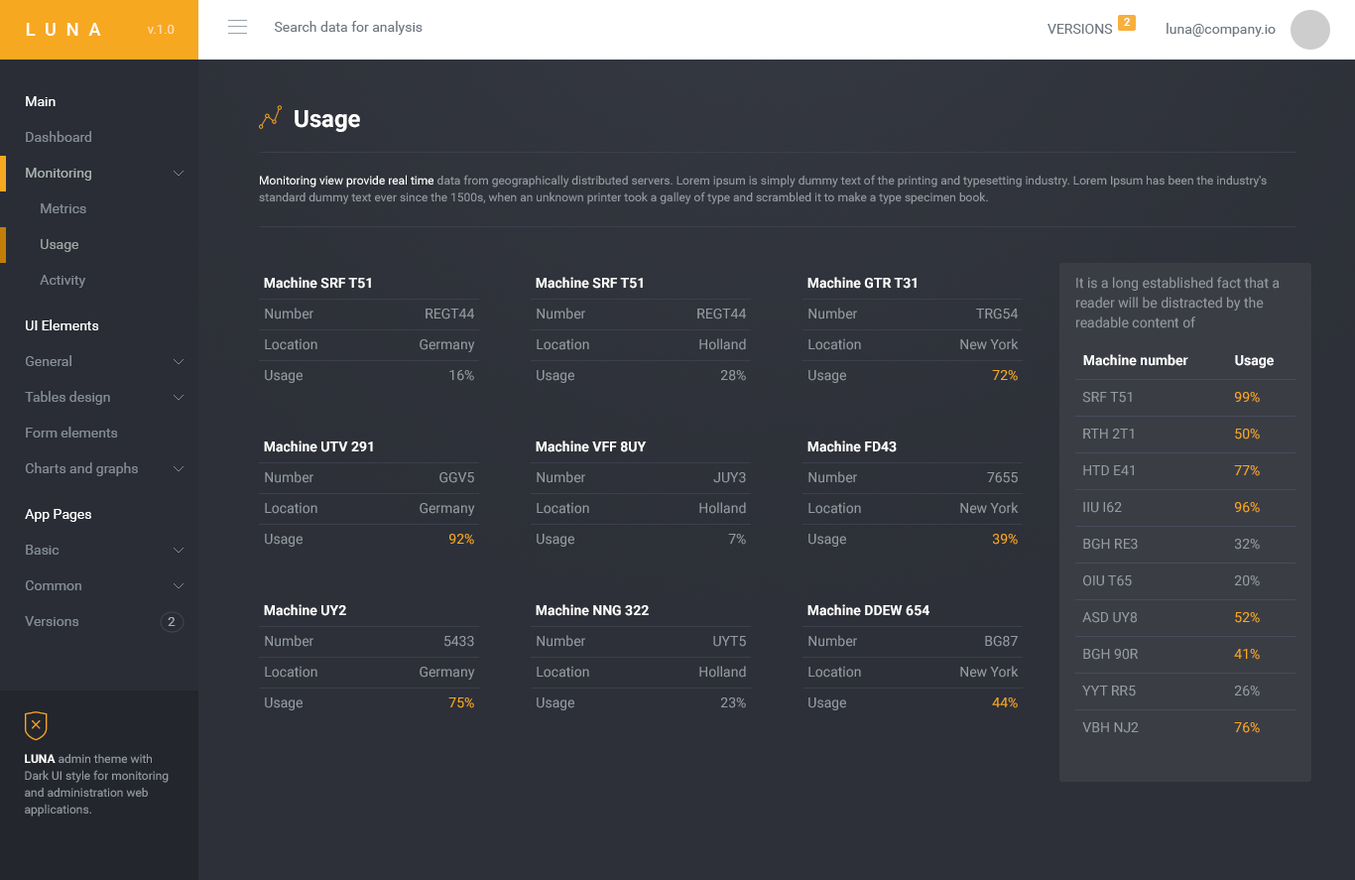
<style>
.page{position:relative;width:1355px;height:880px;background:#2d3038}
.page>*{position:absolute;margin:0}
.t1{font:10.9px "Roboto-Bold";color:#ffffff}
.t2{font:17.9px "Roboto-Medium";letter-spacing:0.55em;color:#ffffff}
.t3{font:12.9px "Roboto-Regular";color:#fbdfbc}
.t4{font:13.9px "Roboto-Regular";color:#6f7780}
.t5{font:13.9px "Roboto-Regular";color:#ffffff}
.t6{font:23.8px "Roboto-Bold";color:#ffffff}
.t7{font:13.9px "Roboto-Regular";color:#848c94}
.t8{font:13.9px "Roboto-Regular";color:#a9b2b0}
.t9{font:11.9px/16.9px "Roboto-Regular";color:#949ba2}
.t10{font:11.9px/16.9px "Roboto-Regular";color:#ffffff}
.t11{font:13.9px "Roboto-Regular";color:#9ca4a3}
.t12{font:13.9px "Roboto-Bold";color:#ffffff}
.t13{font:13.9px/19.8px "Roboto-Regular";color:#949ba2}
.t14{font:13.9px "Roboto-Regular";color:#949ba2}
.t15{font:13.9px "Roboto-Regular";color:#f6a821}
.t16{font:12.9px "Roboto-Regular";color:#aaacb5}
.t17{font:11.9px/16.9px "Roboto-Bold";color:#ffffff}
</style>
<div class="page">
<p class="t1" style="left:1124px;top:18px;width:6px;height:8px">2</p>
<p class="t2" style="left:26px;top:23px;width:75px;height:13px">LUNA</p>
<p class="t3" style="left:147px;top:25px;width:28px;height:9px">v.1.0</p>
<p class="t4" style="left:274px;top:21px;width:149px;height:14px">Search data for analysis</p>
<p class="t4" style="left:1048px;top:24px;width:65px;height:10px">VERSIONS</p>
<p class="t4" style="left:1167px;top:23px;width:109px;height:14px">luna@company.io</p>
<p class="t5" style="left:26px;top:96px;width:30px;height:10px">Main</p>
<p class="t6" style="left:295px;top:110px;width:65px;height:22px">Usage</p>
<p class="t7" style="left:26px;top:131px;width:65px;height:11px">Dashboard</p>
<p class="t8" style="left:26px;top:168px;width:65px;height:13px">Monitoring</p>
<p class="t9" style="left:259px;top:175px;width:1008px;height:29px"><span class="t10">Monitoring view provide real time</span> data from geographically distributed servers. Lorem ipsum is simply dummy text of the printing and typesetting industry. Lorem Ipsum has been the industry's standard dummy text ever since the 1500s, when an unknown printer took a galley of type and scrambled it to make a type specimen book.</p>
<p class="t7" style="left:41px;top:203px;width:45px;height:10px">Metrics</p>
<p class="t11" style="left:41px;top:239px;width:37px;height:13px">Usage</p>
<p class="t7" style="left:40px;top:275px;width:46px;height:13px">Activity</p>
<p class="t12" style="left:264px;top:277px;width:107px;height:12px">Machine SRF T51</p>
<p class="t12" style="left:536px;top:277px;width:107px;height:12px">Machine SRF T51</p>
<p class="t12" style="left:808px;top:277px;width:109px;height:12px">Machine GTR T31</p>
<p class="t13" style="left:1076px;top:277px;width:204px;height:51px">It is a long established fact that a reader will be distracted by the readable content of</p>
<p class="t14" style="left:265px;top:308px;width:48px;height:11px">Number</p>
<p class="t14" style="left:426px;top:309px;width:48px;height:10px">REGT44</p>
<p class="t14" style="left:537px;top:308px;width:48px;height:11px">Number</p>
<p class="t14" style="left:697px;top:309px;width:49px;height:10px">REGT44</p>
<p class="t14" style="left:809px;top:308px;width:48px;height:11px">Number</p>
<p class="t14" style="left:976px;top:309px;width:42px;height:10px">TRG54</p>
<p class="t5" style="left:26px;top:319px;width:73px;height:11px">UI Elements</p>
<p class="t14" style="left:265px;top:338px;width:52px;height:12px">Location</p>
<p class="t14" style="left:420px;top:339px;width:55px;height:13px">Germany</p>
<p class="t14" style="left:537px;top:338px;width:52px;height:12px">Location</p>
<p class="t14" style="left:699px;top:338px;width:47px;height:12px">Holland</p>
<p class="t14" style="left:809px;top:338px;width:52px;height:12px">Location</p>
<p class="t14" style="left:960px;top:338px;width:59px;height:12px">New York</p>
<p class="t7" style="left:26px;top:355px;width:45px;height:11px">General</p>
<p class="t12" style="left:1083px;top:354px;width:105px;height:12px">Machine number</p>
<p class="t12" style="left:1235px;top:355px;width:39px;height:13px">Usage</p>
<p class="t14" style="left:265px;top:370px;width:38px;height:13px">Usage</p>
<p class="t14" style="left:449px;top:370px;width:25px;height:11px">16%</p>
<p class="t14" style="left:537px;top:370px;width:37px;height:13px">Usage</p>
<p class="t14" style="left:721px;top:370px;width:25px;height:11px">28%</p>
<p class="t14" style="left:809px;top:370px;width:37px;height:13px">Usage</p>
<p class="t15" style="left:992px;top:370px;width:26px;height:11px">72%</p>
<p class="t7" style="left:25px;top:391px;width:85px;height:14px">Tables design</p>
<p class="t14" style="left:1082px;top:392px;width:50px;height:11px">SRF T51</p>
<p class="t15" style="left:1235px;top:392px;width:25px;height:11px">99%</p>
<p class="t7" style="left:26px;top:427px;width:92px;height:10px">Form elements</p>
<p class="t14" style="left:1083px;top:429px;width:51px;height:9px">RTH 2T1</p>
<p class="t15" style="left:1235px;top:429px;width:25px;height:10px">50%</p>
<p class="t12" style="left:264px;top:440px;width:109px;height:12px">Machine UTV 291</p>
<p class="t12" style="left:536px;top:440px;width:111px;height:12px">Machine VFF 8UY</p>
<p class="t12" style="left:808px;top:440px;width:89px;height:12px">Machine FD43</p>
<p class="t7" style="left:25px;top:462px;width:113px;height:14px">Charts and graphs</p>
<p class="t14" style="left:265px;top:471px;width:48px;height:12px">Number</p>
<p class="t14" style="left:439px;top:472px;width:35px;height:11px">GGV5</p>
<p class="t14" style="left:537px;top:471px;width:48px;height:12px">Number</p>
<p class="t14" style="left:713px;top:472px;width:33px;height:11px">JUY3</p>
<p class="t14" style="left:809px;top:471px;width:48px;height:12px">Number</p>
<p class="t14" style="left:987px;top:472px;width:31px;height:11px">7655</p>
<p class="t14" style="left:1083px;top:465px;width:51px;height:10px">HTD E41</p>
<p class="t15" style="left:1234px;top:465px;width:26px;height:11px">77%</p>
<p class="t5" style="left:25px;top:509px;width:66px;height:13px">App Pages</p>
<p class="t14" style="left:265px;top:502px;width:52px;height:12px">Location</p>
<p class="t14" style="left:420px;top:503px;width:55px;height:13px">Germany</p>
<p class="t14" style="left:537px;top:502px;width:52px;height:12px">Location</p>
<p class="t14" style="left:699px;top:502px;width:47px;height:12px">Holland</p>
<p class="t14" style="left:809px;top:502px;width:52px;height:12px">Location</p>
<p class="t14" style="left:960px;top:502px;width:59px;height:12px">New York</p>
<p class="t14" style="left:1083px;top:502px;width:39px;height:11px">IIU I62</p>
<p class="t15" style="left:1235px;top:502px;width:25px;height:11px">96%</p>
<p class="t14" style="left:265px;top:534px;width:38px;height:13px">Usage</p>
<p class="t15" style="left:449px;top:534px;width:25px;height:11px">92%</p>
<p class="t14" style="left:537px;top:534px;width:37px;height:13px">Usage</p>
<p class="t14" style="left:728px;top:534px;width:18px;height:11px">7%</p>
<p class="t14" style="left:809px;top:534px;width:37px;height:13px">Usage</p>
<p class="t15" style="left:993px;top:534px;width:25px;height:11px">39%</p>
<p class="t7" style="left:26px;top:545px;width:34px;height:10px">Basic</p>
<p class="t14" style="left:1083px;top:539px;width:55px;height:11px">BGH RE3</p>
<p class="t14" style="left:1235px;top:539px;width:25px;height:11px">32%</p>
<p class="t7" style="left:25px;top:580px;width:56px;height:10px">Common</p>
<p class="t14" style="left:1083px;top:575px;width:49px;height:11px">OIU T65</p>
<p class="t14" style="left:1235px;top:575px;width:25px;height:11px">20%</p>
<p class="t12" style="left:264px;top:604px;width:82px;height:12px">Machine UY2</p>
<p class="t12" style="left:536px;top:604px;width:113px;height:12px">Machine NNG 322</p>
<p class="t12" style="left:808px;top:604px;width:122px;height:12px">Machine DDEW 654</p>
<p class="t7" style="left:25px;top:616px;width:54px;height:10px">Versions</p>
<p class="t16" style="left:168px;top:617px;width:8px;height:9px">2</p>
<p class="t14" style="left:1082px;top:612px;width:55px;height:11px">ASD UY8</p>
<p class="t15" style="left:1235px;top:612px;width:25px;height:11px">52%</p>
<p class="t14" style="left:265px;top:635px;width:48px;height:12px">Number</p>
<p class="t14" style="left:444px;top:636px;width:30px;height:11px">5433</p>
<p class="t14" style="left:537px;top:635px;width:48px;height:12px">Number</p>
<p class="t14" style="left:713px;top:636px;width:33px;height:11px">UYT5</p>
<p class="t14" style="left:809px;top:635px;width:48px;height:12px">Number</p>
<p class="t14" style="left:985px;top:636px;width:33px;height:11px">BG87</p>
<p class="t14" style="left:1083px;top:649px;width:55px;height:11px">BGH 90R</p>
<p class="t15" style="left:1234px;top:649px;width:26px;height:11px">41%</p>
<p class="t14" style="left:265px;top:666px;width:52px;height:12px">Location</p>
<p class="t14" style="left:537px;top:666px;width:52px;height:12px">Location</p>
<p class="t14" style="left:699px;top:666px;width:47px;height:12px">Holland</p>
<p class="t14" style="left:809px;top:666px;width:52px;height:12px">Location</p>
<p class="t14" style="left:960px;top:666px;width:59px;height:12px">New York</p>
<p class="t14" style="left:420px;top:667px;width:55px;height:13px">Germany</p>
<p class="t14" style="left:1082px;top:686px;width:54px;height:10px">YYT RR5</p>
<p class="t14" style="left:1235px;top:686px;width:25px;height:10px">26%</p>
<p class="t14" style="left:265px;top:697px;width:38px;height:13px">Usage</p>
<p class="t15" style="left:448px;top:697px;width:26px;height:11px">75%</p>
<p class="t14" style="left:537px;top:697px;width:37px;height:13px">Usage</p>
<p class="t14" style="left:721px;top:697px;width:25px;height:11px">23%</p>
<p class="t14" style="left:809px;top:697px;width:37px;height:13px">Usage</p>
<p class="t15" style="left:992px;top:697px;width:26px;height:11px">44%</p>
<p class="t14" style="left:1082px;top:722px;width:57px;height:11px">VBH NJ2</p>
<p class="t15" style="left:1234px;top:722px;width:26px;height:11px">76%</p>
<p class="t9" style="left:25px;top:754px;width:144px;height:62px"><span class="t17">LUNA </span>admin theme with Dark UI style for monitoring and administration web applications.</p>
</div>
